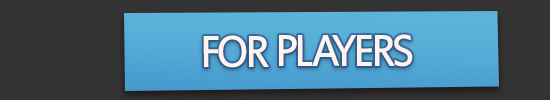
<style>
.page{position:relative;width:550px;height:100px;background:#333333}
.page>*{position:absolute;margin:0}
.t1{font:70px "EstrangeloEdessa";letter-spacing:-0.075em;color:#fff3ed;font-variant:small-caps;scale:0.95 1}
</style>
<div class="page">
<p class="t1" style="left:203px;top:34px;width:210px;height:34px">for players</p>
</div>
